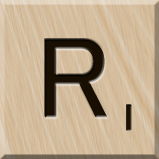
<style>
.page{position:relative;width:159px;height:159px}
.page>*{position:absolute;margin:0}
.t1{font:116px "MS-UIGothic";color:#180e01}
.t2{font:36px "GillSansMT";color:#1c1101;font-weight:bold;scale:1.1 1}
</style>
<div class="page">
<p class="t1" style="left:45px;top:39px;width:63px;height:79px">R</p>
<p class="t2" style="left:126px;top:104px;width:6px;height:27px">1</p>
</div>
